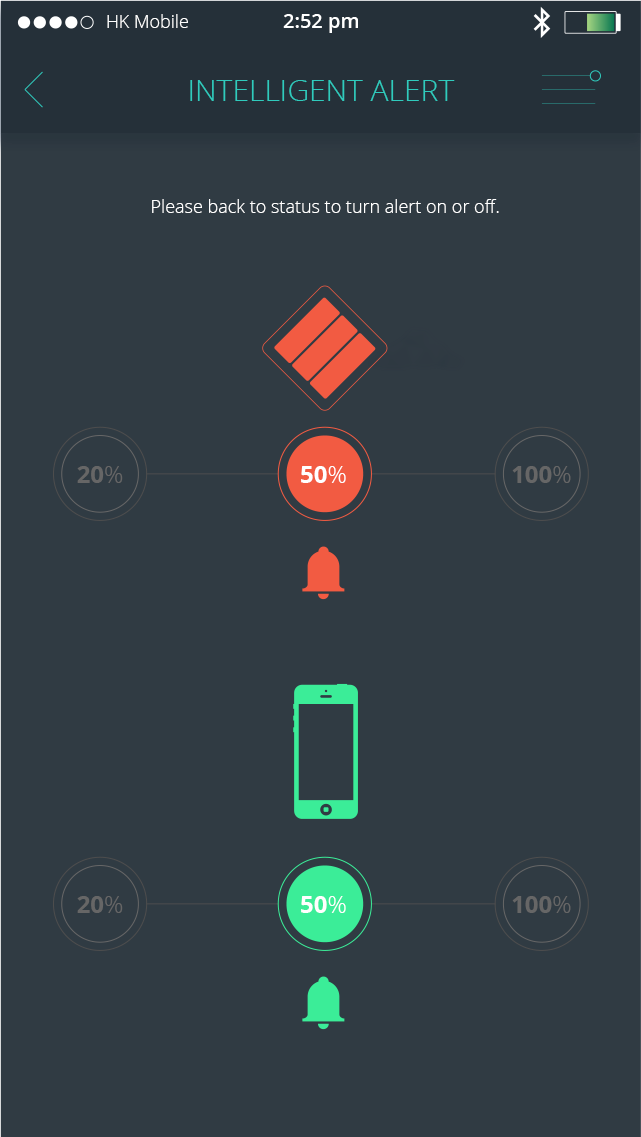
<style>
.page{position:relative;width:641px;height:1137px;background:#303b43}
.page>*{position:absolute;margin:0}
.t1{font:18px "OpenSans-Light";color:#ffffff}
.t2{font:20px "OpenSans-Semibold";color:#ffffff}
.t3{font:30px "OpenSans-Light";color:#30cbbd}
.t4{font:24px "OpenSans-Bold";color:#666666}
.t5{font:24px "OpenSans-Light";color:#666666}
.t6{font:24px "OpenSans-Bold";color:#ffffff}
.t7{font:24px "OpenSans-Light";color:#ffffff}
</style>
<div class="page">
<p class="t1" style="left:107px;top:14px;width:81px;height:14px">HK Mobile</p>
<p class="t2" style="left:283px;top:14px;width:75px;height:19px">2:52 pm</p>
<p class="t3" style="left:190px;top:80px;width:265px;height:21px">INTELLIGENT ALERT</p>
<p class="t1" style="left:152px;top:199px;width:347px;height:14px">Please back to status to turn alert on or off.</p>
<p class="t4" style="left:77px;top:466px;width:46px;height:17px">20<span class="t5">%</span></p>
<p class="t6" style="left:301px;top:466px;width:45px;height:17px">50<span class="t7">%</span></p>
<p class="t4" style="left:512px;top:466px;width:59px;height:17px">100<span class="t5">%</span></p>
<p class="t4" style="left:77px;top:896px;width:46px;height:17px">20<span class="t5">%</span></p>
<p class="t6" style="left:301px;top:896px;width:45px;height:17px">50<span class="t7">%</span></p>
<p class="t4" style="left:512px;top:896px;width:59px;height:17px">100<span class="t5">%</span></p>
</div>
